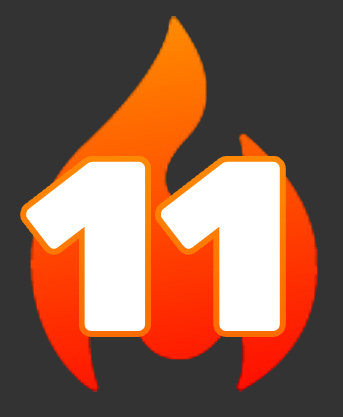
<style>
.page{position:relative;width:343px;height:417px;background:#333333}
.page>*{position:absolute;margin:0}
.t1{font:241.9px "Rubik-Black";color:#ffffff}
</style>
<div class="page">
<p class="t1" style="left:26px;top:161px;width:254px;height:170px">11</p>
</div>
